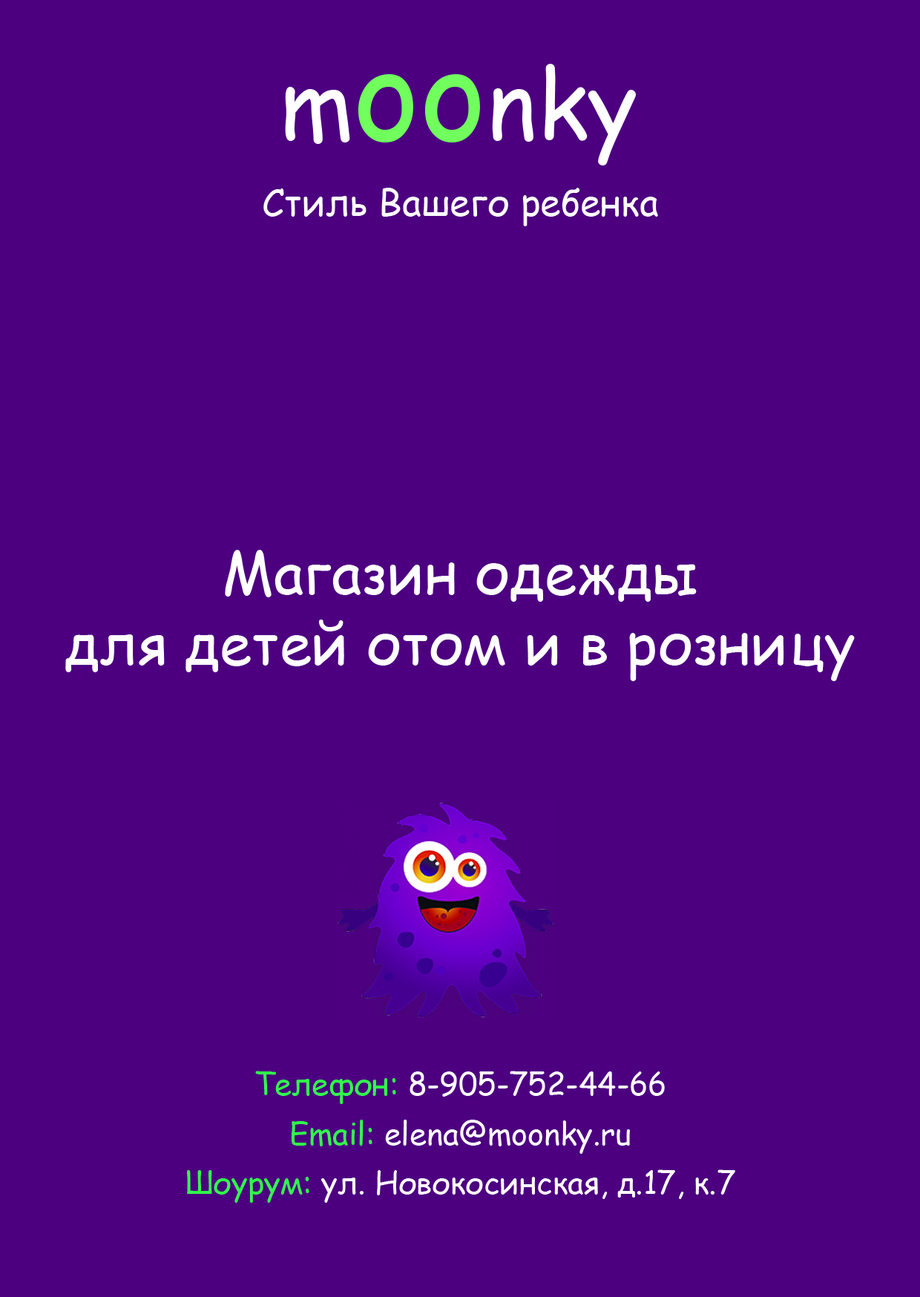
<style>
.page{position:relative;width:920px;height:1297px;background:#4c0080}
.page>*{position:absolute;margin:0}
.t1{font:95.3px "ComicSansMS";color:#ffffff}
.t2{font:127.1px "ComicSansMS";color:#70ff5d}
.t3{font:37.1px "ComicSansMS";color:#ffffff}
.t4{font:58.7px "ComicSansMS";color:#ffffff}
.t5{font:30.9px/49.4px "ComicSansMS";color:#ffffff}
.t6{font:30.9px/49.4px "ComicSansMS";color:#31ff4c}
</style>
<div class="page">
<p class="t1" style="left:285px;top:64px;width:351px;height:101px">m<span class="t2">oo</span>nky</p>
<p class="t3" style="left:263px;top:188px;width:395px;height:38px">Стиль Вашего ребенка</p>
<p class="t4" style="left:65px;top:550px;width:789px;height:131px;text-align:center">Магазин одежды<br>для детей отом и в розницу</p>
<p class="t5" style="left:187px;top:1070px;width:548px;height:132px;text-align:center"><span class="t6">Телефон:</span> 8-905-752-44-66<br><span class="t6">Email: </span>elena@moonky.ru<br><span class="t6">Шоурум:</span> ул. Новокосинская, д.17, к.7</p>
</div>
